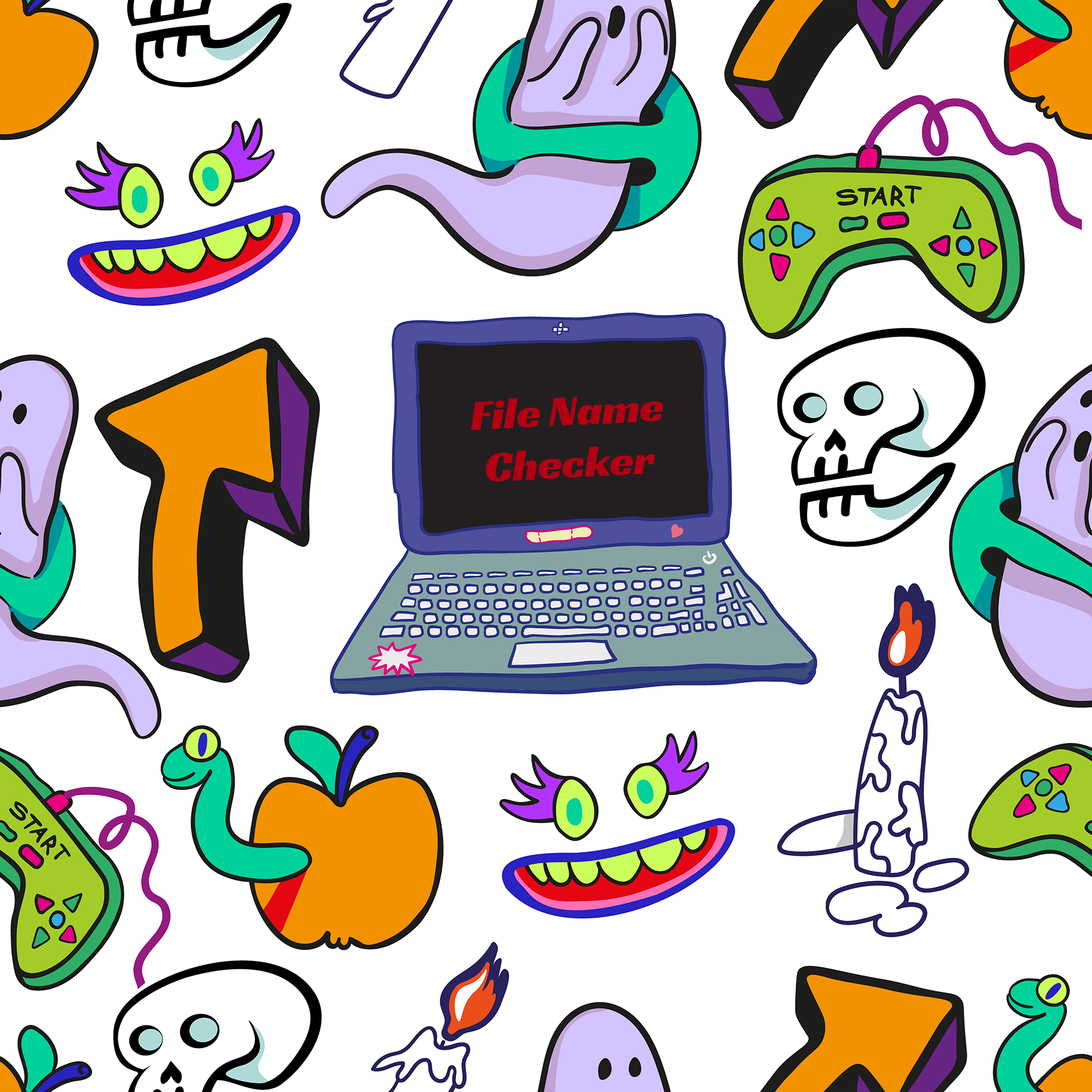
<style>
.page{position:relative;width:1092px;height:1092px;background:#ffffff}
.page>*{position:absolute;margin:0}
.t1{font:43.7px "RacingSansOne-Regular";color:#b30012}
</style>
<div class="page">
<p class="t1" style="left:471px;top:396px;width:192px;height:86px;text-align:center;rotate:-3deg">File Name<br>Checker</p>
</div>
